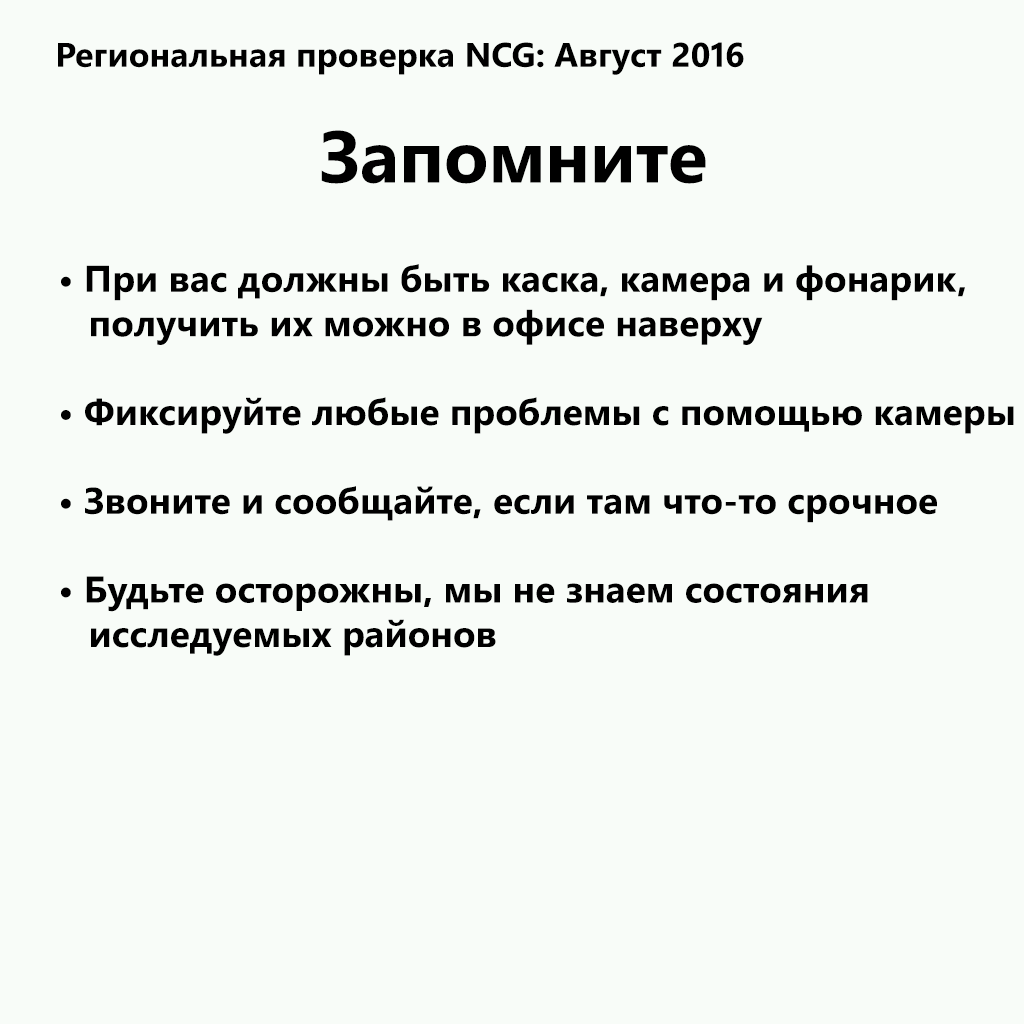
<style>
.page{position:relative;width:1024px;height:1024px;background:#f8fcf8}
.page>*{position:absolute;margin:0}
.t1{font:34px "SegoeWP-Bold";color:#000000}
.t2{font:73px "SegoeWP-Bold";color:#000000}
.t3{font:37px "SegoeWP-Bold";color:#000000}
</style>
<div class="page">
<p class="t1" style="left:58px;top:42px;width:686px;height:33px">Региональная проверка NCG: Август 2016</p>
<p class="t2" style="left:321px;top:130px;width:385px;height:54px">Запомните</p>
<p class="t3" style="left:61px;top:264px;width:953px;height:392px">• При вас должны быть каска, камера и фонарик,<br>   получить их можно в офисе наверху<br><br>• Фиксируйте любые проблемы с помощью камеры<br><br>• Звоните и сообщайте, если там что-то срочное<br><br>• Будьте осторожны, мы не знаем состояния <br>   исследуемых районов</p>
</div>
